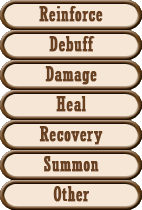
<style>
.page{position:relative;width:142px;height:210px;background:#f6e6d5}
.page>*{position:absolute;margin:0}
.t1{font:20px "Rockwell-Condensed";color:#6a4120;font-weight:bold}
</style>
<div class="page">
<p class="t1" style="left:39px;top:6px;width:64px;height:16px">Reinforce</p>
<p class="t1" style="left:49px;top:36px;width:46px;height:16px">Debuff</p>
<p class="t1" style="left:45px;top:66px;width:52px;height:19px">Damage</p>
<p class="t1" style="left:56px;top:96px;width:30px;height:16px">Heal</p>
<p class="t1" style="left:39px;top:126px;width:64px;height:19px">Recovery</p>
<p class="t1" style="left:44px;top:156px;width:55px;height:16px">Summon</p>
<p class="t1" style="left:53px;top:186px;width:36px;height:16px">Other</p>
</div>
